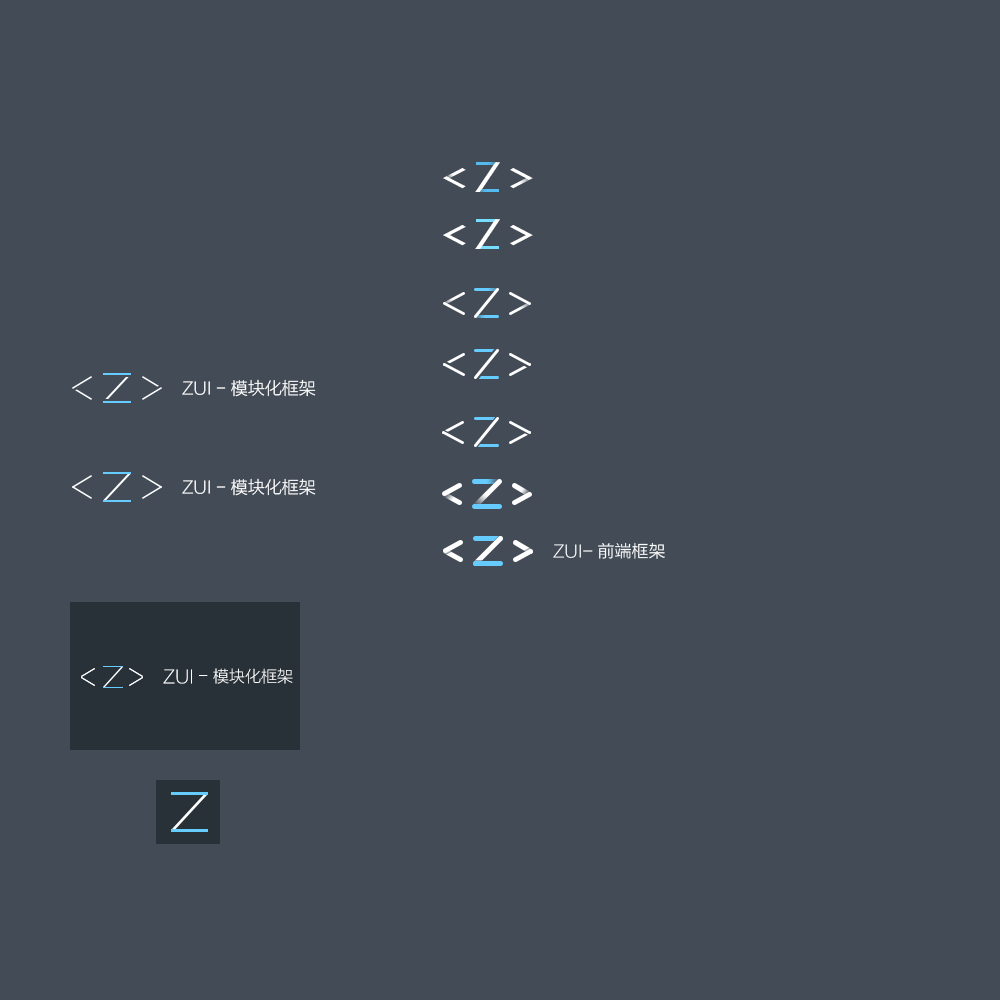
<style>
.page{position:relative;width:1000px;height:1000px;background:#434c56}
.page>*{position:absolute;margin:0}
.t1{font:37.3px "Consolas";color:#ffffff;scale:1.6 1}
.t2{font:17px "FZLTXHK--GBK1-0";color:#ffffff}
.t3{font:18px "FZLTXHK--GBK1-0";color:#ffffff}
.t4{font:16px "FZLTXHK--GBK1-0";color:#ffffff}
</style>
<div class="page">
<p class="t1" style="left:443px;top:219px;width:90px;height:30px">&lt;/&gt;</p>
<p class="t2" style="left:182px;top:379px;width:134px;height:18px">ZUI -模块化框架</p>
<p class="t2" style="left:182px;top:478px;width:134px;height:18px">ZUI -模块化框架</p>
<p class="t2" style="left:553px;top:542px;width:112px;height:17px">ZUI-前端框架</p>
<p class="t3" style="left:163px;top:668px;width:130px;height:16px">ZUI -<span class="t4">模块化框架</span></p>
</div>
